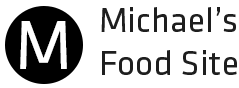
<style>
.page{position:relative;width:239px;height:88px;background:#ffffff}
.page>*{position:absolute;margin:0}
.t1{font:36px "KlavikaBasic-Regular";color:#1e1e1e}
.t2{font:72px "KlavikaBasic-Regular";color:#ffffff}
</style>
<div class="page">
<p class="t1" style="left:101px;top:7px;width:136px;height:68px">Michael’s<br>Food Site</p>
<p class="t2" style="left:20px;top:21px;width:47px;height:48px">M</p>
</div>
